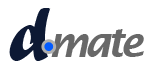
<style>
.page{position:relative;width:150px;height:75px;background:#ffffff}
.page>*{position:absolute;margin:0}
.t1{font:75px "ForteMT";color:#0d1934}
.t2{font:41.7px "LucidaSans-DemiItalic";letter-spacing:-0.1em;color:#686868}
</style>
<div class="page">
<p class="t1" style="left:9px;top:8px;width:42px;height:53px">d</p>
<p class="t2" style="left:51px;top:29px;width:93px;height:28px">mate</p>
</div>
